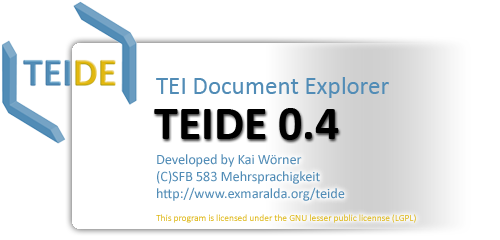
<style>
.page{position:relative;width:500px;height:240px;background:#ffffff}
.page>*{position:absolute;margin:0}
.t1{font:25.4px "Calibri";letter-spacing:-0.005em;color:#518cb6}
.t2{font:48.4px "Calibri-Bold";letter-spacing:-0.005em;color:#000000}
.t3{font:14.3px "Calibri";letter-spacing:-0.005em;color:#518cb6}
.t4{font:9.5px "Calibri";letter-spacing:-0.005em;color:#3b8b2f}
.t5{font:9.5px "Calibri";letter-spacing:-0.005em;color:#ddb50f}
</style>
<div class="page">
<p class="t1" style="left:156px;top:77px;width:233px;height:21px">TEI Document Explorer</p>
<p class="t2" style="left:154px;top:108px;width:185px;height:32px">TEIDE 0.4</p>
<p class="t3" style="left:156px;top:154px;width:260px;height:69px">Developed by Kai Wörner<br>(C)SFB 583 Mehrsprachigkeit<br>http://www.exmaralda.org/teide<br><span class="t4"><br></span><span class="t5">This program is licensed under the GNU lesser public licennse (LGPL)</span></p>
</div>
